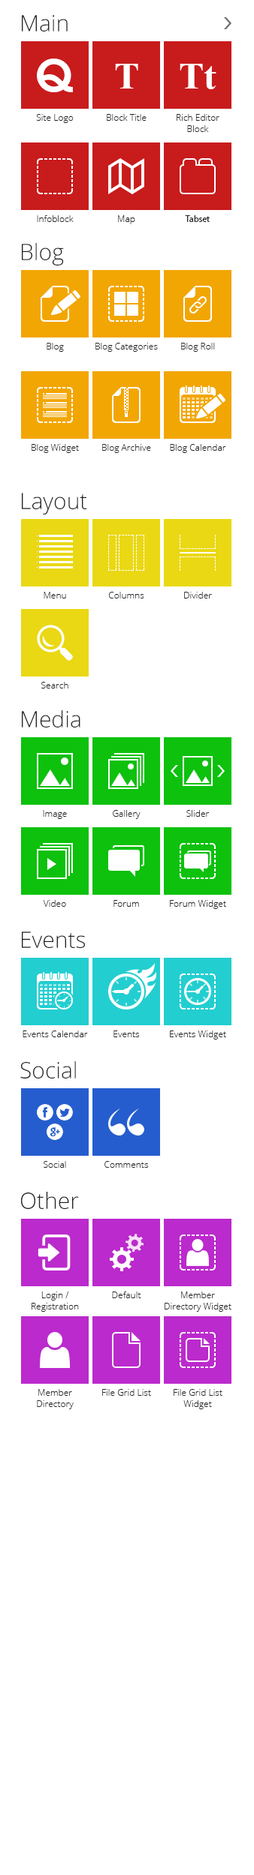
<style>
.page{position:relative;width:254px;height:1875px;background:#ffffff}
.page>*{position:absolute;margin:0}
.t1{font:22.5px "OpenSans-Light";color:#232323}
.t2{font:37.5px "TimesNewRomanPS-BoldMT";color:#ffffff}
.t3{font:9px "OpenSans-Light";color:#232323}
.t4{font:9px "MyriadPro-Regular";color:#232323}
</style>
<div class="page">
<p class="t1" style="left:22px;top:15px;width:46px;height:17px">Main</p>
<p class="t2" style="left:115px;top:64px;width:23px;height:24px">T</p>
<p class="t2" style="left:179px;top:64px;width:37px;height:25px">Tt</p>
<p class="t3" style="left:36px;top:114px;width:38px;height:9px">Site Logo</p>
<p class="t3" style="left:106px;top:114px;width:40px;height:7px">Block Title</p>
<p class="t3" style="left:176px;top:114px;width:43px;height:18px;text-align:center">Rich Editor<br>Block</p>
<p class="t3" style="left:37px;top:215px;width:37px;height:7px">Infoblock</p>
<p class="t3" style="left:118px;top:215px;width:17px;height:9px">Map</p>
<p class="t4" style="left:184px;top:215px;width:25px;height:7px">Tabset</p>
<p class="t1" style="left:22px;top:243px;width:42px;height:23px">Blog</p>
<p class="t3" style="left:46px;top:343px;width:18px;height:9px">Blog</p>
<p class="t3" style="left:95px;top:343px;width:63px;height:9px">Blog Categories</p>
<p class="t3" style="left:181px;top:343px;width:33px;height:9px">Blog Roll</p>
<p class="t3" style="left:32px;top:444px;width:47px;height:9px">Blog Widget</p>
<p class="t3" style="left:102px;top:444px;width:49px;height:9px">Blog Archive</p>
<p class="t3" style="left:170px;top:444px;width:56px;height:9px">Blog Calendar</p>
<p class="t1" style="left:22px;top:493px;width:65px;height:21px">Layout</p>
<p class="t3" style="left:44px;top:592px;width:22px;height:6px">Menu</p>
<p class="t3" style="left:108px;top:592px;width:36px;height:6px">Columns</p>
<p class="t3" style="left:184px;top:592px;width:28px;height:6px">Divider</p>
<p class="t3" style="left:41px;top:682px;width:27px;height:6px">Search</p>
<p class="t1" style="left:22px;top:710px;width:58px;height:18px">Media</p>
<p class="t3" style="left:43px;top:810px;width:24px;height:9px">Image</p>
<p class="t3" style="left:112px;top:810px;width:28px;height:9px">Gallery</p>
<p class="t3" style="left:186px;top:810px;width:22px;height:7px">Slider</p>
<p class="t3" style="left:43px;top:900px;width:23px;height:7px">Video</p>
<p class="t3" style="left:113px;top:900px;width:26px;height:7px">Forum</p>
<p class="t3" style="left:170px;top:900px;width:56px;height:9px">Forum Widget</p>
<p class="t1" style="left:22px;top:932px;width:63px;height:16px">Events</p>
<p class="t3" style="left:22px;top:1030px;width:66px;height:7px">Events Calendar</p>
<p class="t3" style="left:113px;top:1030px;width:27px;height:7px">Events</p>
<p class="t3" style="left:170px;top:1030px;width:56px;height:10px">Events Widget</p>
<p class="t1" style="left:20px;top:1061px;width:56px;height:17px">Social</p>
<p class="t3" style="left:44px;top:1161px;width:22px;height:7px">Social</p>
<p class="t3" style="left:104px;top:1161px;width:44px;height:7px">Comments</p>
<p class="t1" style="left:21px;top:1192px;width:58px;height:17px">Other</p>
<p class="t3" style="left:32px;top:1292px;width:47px;height:20px;text-align:center">Login / Registration</p>
<p class="t3" style="left:112px;top:1292px;width:29px;height:6px">Default</p>
<p class="t3" style="left:164px;top:1292px;width:67px;height:20px;text-align:center">Member Directory Widget</p>
<p class="t3" style="left:37px;top:1389px;width:37px;height:20px;text-align:center">Member Directory</p>
<p class="t3" style="left:102px;top:1389px;width:49px;height:7px">File Grid List</p>
<p class="t3" style="left:173px;top:1389px;width:49px;height:20px;text-align:center">File Grid List Widget</p>
</div>
